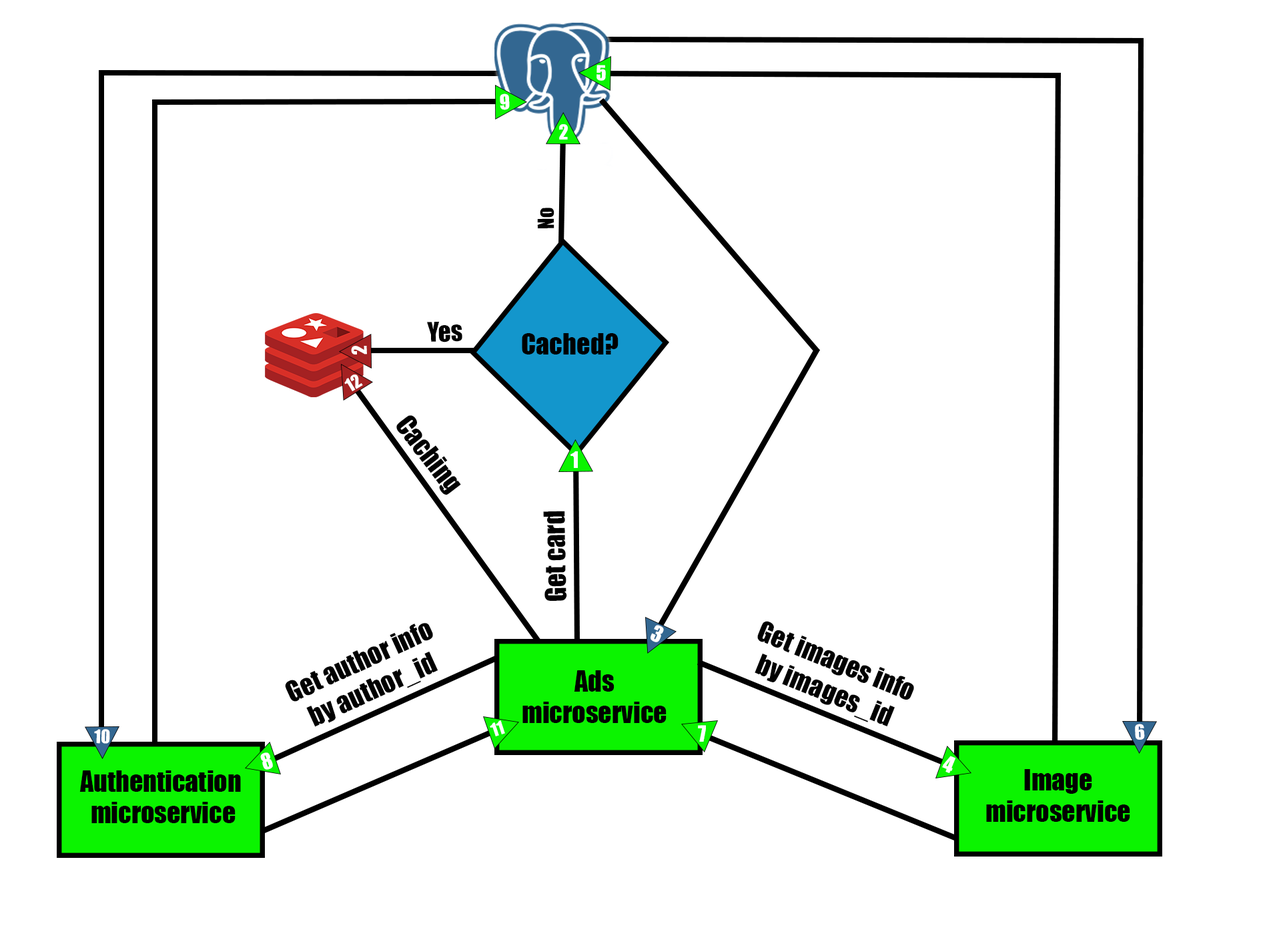
<style>
.page{position:relative;width:1261px;height:946px;background:#ffffff}
.page>*{position:absolute;margin:0}
.t1{font:19px "Impact";color:#ffffff}
.t2{font:20.5px "Impact";color:#000000}
.t3{font:25.1px "Impact";color:#000000}
.t4{font:26.8px "Impact";color:#000000}
.t5{font:17.1px "Impact";color:#ffffff}
.t6{font:26.2px "Impact";color:#010101}
.t7{font:20.5px "Impact";color:#ffffff}
.t8{font:26.7px "Impact";color:#000000}
.t9{font:26.5px "Impact";color:#000000}
.t10{font:17.3px "Impact";color:#ffffff}
</style>
<div class="page">
<p class="t1" style="left:597px;top:65px;width:9px;height:16px;rotate:2deg">5</p>
<p class="t1" style="left:500px;top:93px;width:10px;height:17px;rotate:-2deg">9</p>
<p class="t1" style="left:559px;top:124px;width:9px;height:15px">2</p>
<p class="t2" style="left:537px;top:208px;width:18px;height:20px;rotate:-91deg">No</p>
<p class="t3" style="left:427px;top:321px;width:35px;height:21px;rotate:-2deg">Yes</p>
<p class="t4" style="left:522px;top:333px;width:97px;height:21px">Cached?</p>
<p class="t1" style="left:351px;top:346px;width:16px;height:8px;rotate:-92deg">2</p>
<p class="t5" style="left:344px;top:374px;width:19px;height:17px;rotate:-31deg">12</p>
<p class="t6" style="left:396px;top:415px;width:65px;height:79px;rotate:53deg">Caching</p>
<p class="t7" style="left:571px;top:451px;width:7px;height:17px">1</p>
<p class="t7" style="left:571px;top:451px;width:7px;height:17px">1</p>
<p class="t8" style="left:543px;top:510px;width:24px;height:91px;rotate:-91deg">Get card</p>
<p class="t6" style="left:285px;top:623px;width:153px;height:104px;text-align:center;rotate:-25deg">Get author info<br>by author_id</p>
<p class="t7" style="left:651px;top:625px;width:13px;height:17px;rotate:24deg">3</p>
<p class="t6" style="left:755px;top:621px;width:159px;height:105px;text-align:center;rotate:22deg">Get images info<br>by images_id</p>
<p class="t9" style="left:522px;top:670px;width:145px;height:53px;text-align:center">Ads<br>microservice</p>
<p class="t5" style="left:490px;top:720px;width:15px;height:16px;rotate:-18deg">11</p>
<p class="t7" style="left:698px;top:725px;width:8px;height:16px;rotate:-1deg">7</p>
<p class="t1" style="left:1135px;top:723px;width:10px;height:16px;rotate:-3deg">6</p>
<p class="t10" style="left:94px;top:729px;width:16px;height:14px;rotate:1deg">10</p>
<p class="t7" style="left:260px;top:752px;width:13px;height:17px;rotate:-17deg">8</p>
<p class="t7" style="left:942px;top:755px;width:14px;height:18px;rotate:22deg">4</p>
<p class="t9" style="left:79px;top:770px;width:162px;height:53px;text-align:center">Authentication<br> microservice</p>
<p class="t9" style="left:986px;top:769px;width:144px;height:52px;text-align:center">Image<br>microservice</p>
</div>
